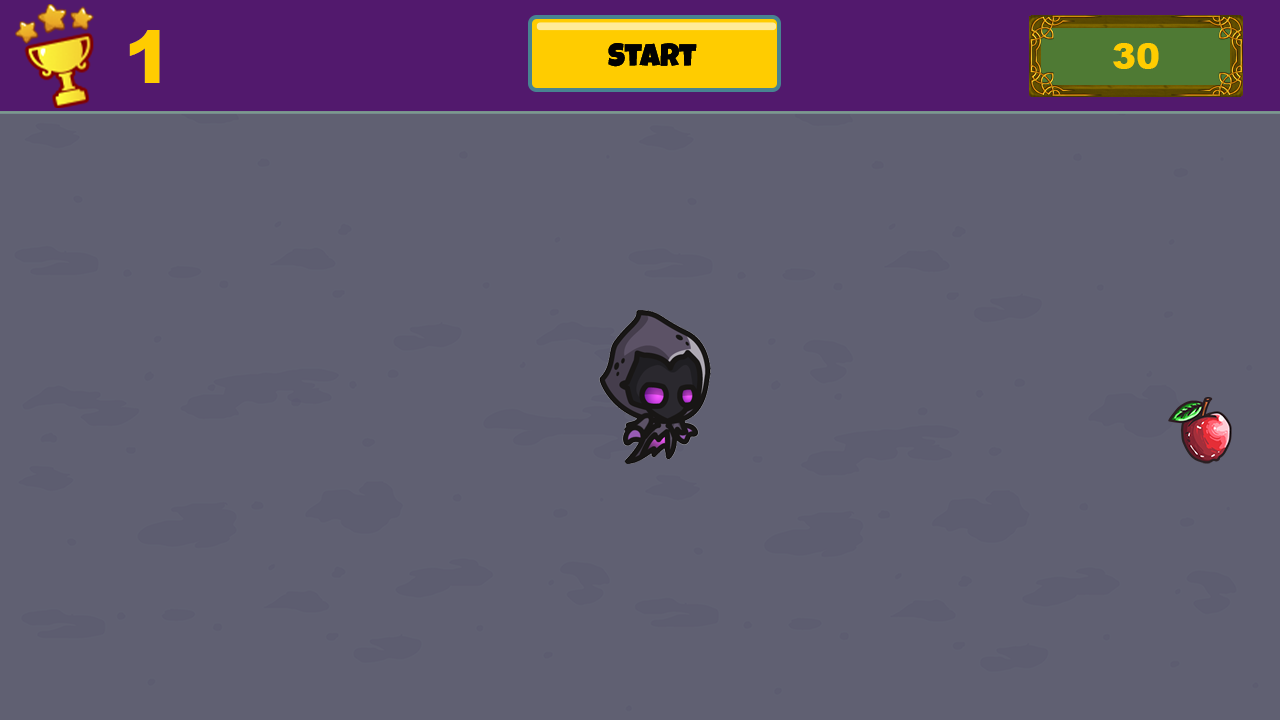
<style>
.page{position:relative;width:1280px;height:720px;background:#606072}
.page>*{position:absolute;margin:0}
.t1{font:72px "Arial-Black";color:#ffcc00}
.t2{font:36px "Arial-Black";color:#ffcc00}
</style>
<div class="page">
<p class="t1" style="left:129px;top:30px;width:31px;height:53px">1</p>
<p class="t2" style="left:1113px;top:43px;width:46px;height:26px">30</p>
</div>
